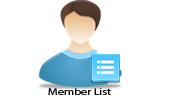
<style>
.page{position:relative;width:171px;height:99px;background:#ffffff}
.page>*{position:absolute;margin:0}
.t1{font:9px "MyriadPro-Regular";color:#000000;scale:1.34 1}
</style>
<div class="page">
<p class="t1" style="left:48px;top:88px;width:63px;height:7px">Member List</p>
</div>
